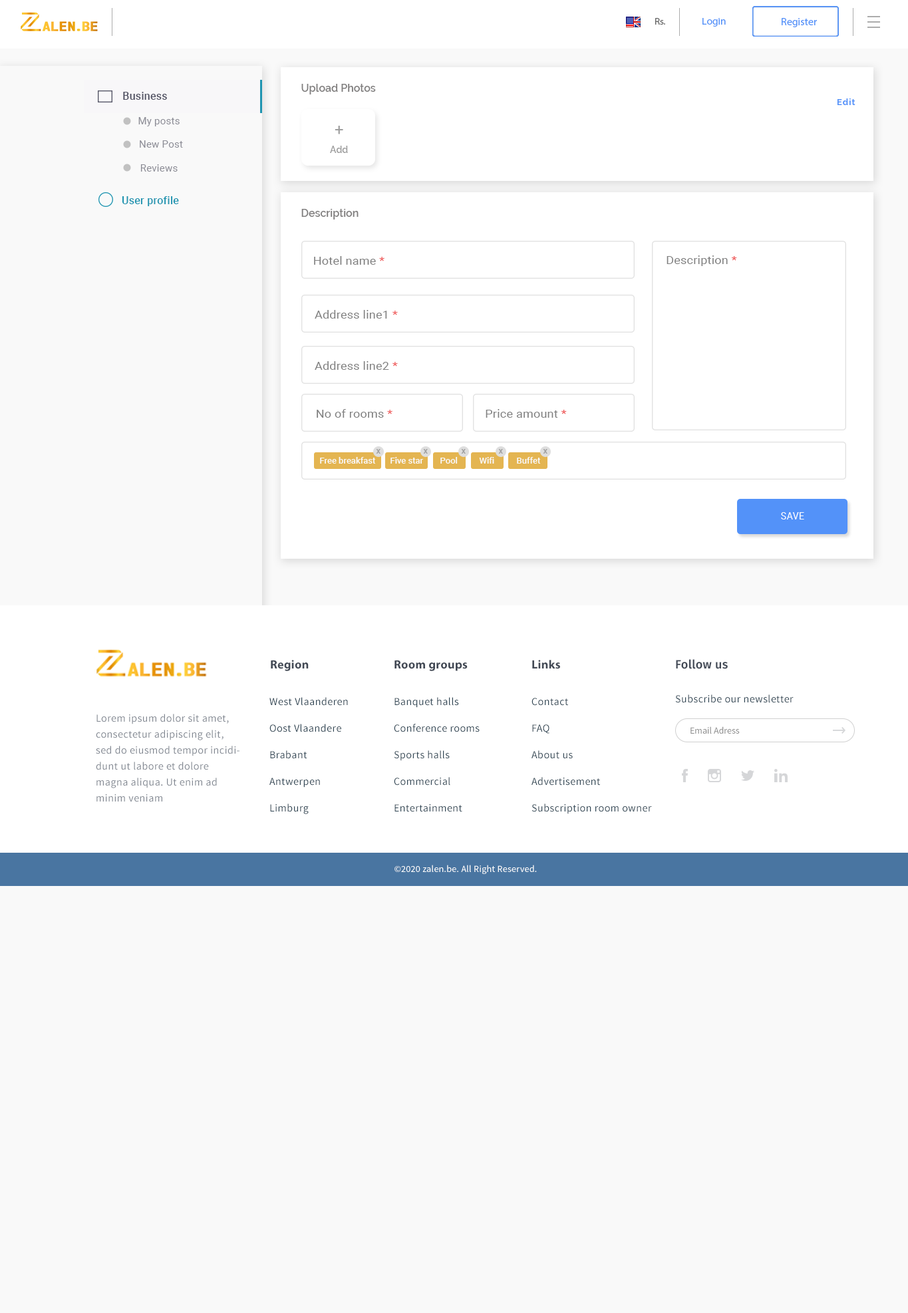
<style>
.page{position:relative;width:908px;height:1313px;background:#f9f9f9}
.page>*{position:absolute;margin:0}
.t1{font:9.4px "MyriadPro-Regular";color:#636363;scale:1.04 1}
.t2{font:9.8px "MyriadPro-Regular";color:#5392f9;scale:1.07 1}
.t3{font:10.6px "MyriadPro-Regular";color:#5392f9}
.t4{font:10.6px "Raleway-SemiBold";color:#817f7f}
.t5{font:10.6px "Roboto-Medium";letter-spacing:0.02em;color:#525364}
.t6{font:8.6px "Raleway-Bold";letter-spacing:0.074em;color:#5392f9}
.t7{font:9.9px "Roboto-Regular";letter-spacing:0.02em;color:#8c8d96}
.t8{font:16px "Roboto-Regular";color:#9e9e9e}
.t9{font:9.3px "Raleway-SemiBold";color:#9e9e9e}
.t10{font:10.6px "Roboto-Medium";letter-spacing:0.02em;color:#1f95b1}
.t11{font:11.2px "Roboto-Regular";letter-spacing:0.02em;color:#818181;scale:1.06 1}
.t12{font:11.2px "Roboto-Regular";letter-spacing:0.02em;color:#ef5252;scale:1.06 1}
.t13{font:8.6px "Roboto-Medium";color:#9f9f9f}
.t14{font:8.6px "Roboto-Medium";color:#f9f9f9}
.t15{font:9.8px "Roboto-Regular";letter-spacing:0.02em;color:#ffffff}
.t16{font:12px "MyriadPro-Bold";letter-spacing:0.02em;color:#424955}
.t17{font:12px "FiraSans-Medium";letter-spacing:0.02em;color:#424955}
.t18{font:10.6px/26.6px "SourceSansPro-Regular";letter-spacing:0.03em;color:#2e4453}
.t19{font:10.6px "SourceSansPro-Regular";letter-spacing:0.03em;color:#2e4453}
.t20{font:10.6px/16px "SourceSansPro-Regular";letter-spacing:0.03em;color:#818791}
.t21{font:9.3px "SourceSansPro-Regular";color:#8c8c8c}
.t22{font:9.3px "SourceSansPro-Regular";letter-spacing:0.02em;color:#ffffff}
</style>
<div class="page">
<p class="t1" style="left:655px;top:18px;width:10px;height:7px">Rs.</p>
<p class="t2" style="left:702px;top:18px;width:24px;height:9px">Login</p>
<p class="t3" style="left:782px;top:18px;width:35px;height:9px">Register</p>
<p class="t4" style="left:301px;top:84px;width:75px;height:10px">Upload Photos</p>
<p class="t5" style="left:123px;top:92px;width:44px;height:8px">Business</p>
<p class="t6" style="left:837px;top:98px;width:18px;height:7px">Edit</p>
<p class="t7" style="left:138px;top:117px;width:42px;height:9px">My posts</p>
<p class="t8" style="left:335px;top:126px;width:8px;height:8px">+</p>
<p class="t7" style="left:140px;top:140px;width:43px;height:8px">New Post</p>
<p class="t9" style="left:330px;top:146px;width:18px;height:7px">Add</p>
<p class="t7" style="left:140px;top:164px;width:38px;height:8px">Reviews</p>
<p class="t10" style="left:122px;top:196px;width:57px;height:10px">User profile</p>
<p class="t4" style="left:301px;top:209px;width:58px;height:11px">Description</p>
<p class="t11" style="left:314px;top:256px;width:71px;height:9px">Hotel name <span class="t12">*</span></p>
<p class="t11" style="left:667px;top:255px;width:70px;height:11px">Description <span class="t12">*</span></p>
<p class="t11" style="left:315px;top:310px;width:83px;height:9px">Address line1 <span class="t12">*</span></p>
<p class="t11" style="left:315px;top:361px;width:83px;height:9px">Address line2 <span class="t12">*</span></p>
<p class="t11" style="left:317px;top:409px;width:75px;height:9px">No of rooms <span class="t12">*</span></p>
<p class="t11" style="left:486px;top:409px;width:81px;height:9px">Price amount <span class="t12">*</span></p>
<p class="t13" style="left:376px;top:449px;width:5px;height:5px">x</p>
<p class="t13" style="left:423px;top:449px;width:5px;height:5px">x</p>
<p class="t13" style="left:461px;top:449px;width:5px;height:5px">x</p>
<p class="t13" style="left:498px;top:449px;width:5px;height:5px">x</p>
<p class="t13" style="left:543px;top:449px;width:4px;height:5px">x</p>
<p class="t14" style="left:320px;top:457px;width:56px;height:7px">Free breakfast</p>
<p class="t14" style="left:390px;top:457px;width:33px;height:7px">Five star</p>
<p class="t14" style="left:440px;top:457px;width:18px;height:7px">Pool</p>
<p class="t14" style="left:479px;top:457px;width:15px;height:7px">Wifi</p>
<p class="t14" style="left:517px;top:457px;width:24px;height:7px">Buffet</p>
<p class="t15" style="left:781px;top:512px;width:23px;height:8px">SAVE</p>
<p class="t16" style="left:271px;top:660px;width:38px;height:11px">Region</p>
<p class="t16" style="left:394px;top:660px;width:74px;height:11px">Room groups</p>
<p class="t16" style="left:532px;top:660px;width:28px;height:9px">Links</p>
<p class="t17" style="left:676px;top:659px;width:52px;height:10px">Follow us</p>
<p class="t18" style="left:269px;top:697px;width:79px;height:117px">West Vlaanderen<br>Oost Vlaandere<br>Brabant<br>Antwerpen<br>Limburg</p>
<p class="t18" style="left:394px;top:697px;width:86px;height:115px">Banquet halls<br>Conference rooms<br>Sports halls<br>Commercial<br>Entertainment</p>
<p class="t18" style="left:532px;top:698px;width:120px;height:116px">Contact<br>FAQ<br>About us<br>Advertisement<br>Subscription room owner</p>
<p class="t19" style="left:675px;top:695px;width:119px;height:8px">Subscribe our newsletter</p>
<p class="t20" style="left:96px;top:714px;width:143px;height:88px">Lorem ipsum dolor sit amet, consectetur adipiscing elit, sed do eiusmod tempor incididunt ut labore et dolore magna aliqua. Ut enim ad minim veniam</p>
<p class="t21" style="left:691px;top:726px;width:49px;height:8px">Email Adress</p>
<p class="t22" style="left:394px;top:865px;width:143px;height:9px">©2020 zalen.be. All Right Reserved.</p>
</div>
